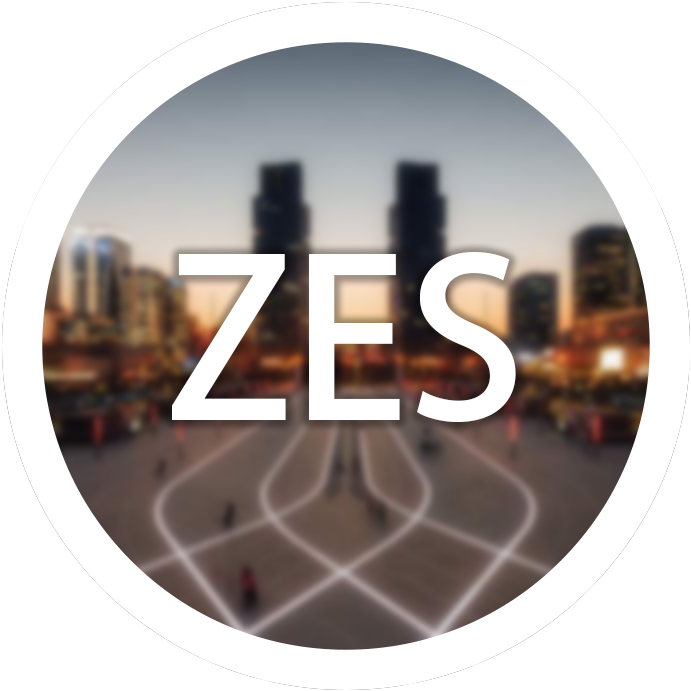
<style>
.page{position:relative;width:691px;height:691px;background:#ffffff}
.page>*{position:absolute;margin:0}
.t1{font:216.8px "AdobeHeitiStd-Regular";color:#ffffff}
</style>
<div class="page">
<p class="t1" style="left:172px;top:252px;width:344px;height:170px">ZES</p>
</div>
